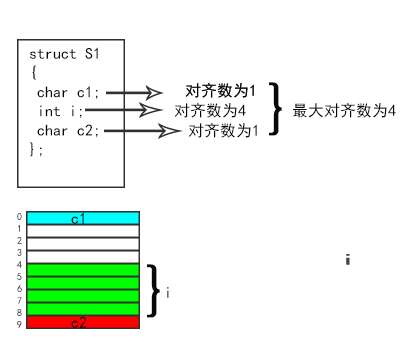
<style>
.page{position:relative;width:418px;height:359px;background:#ffffff}
.page>*{position:absolute;margin:0}
.t1{font:16px "SimHei";color:#0a0909}
.t2{font:61px "SimHei";color:#0a0909}
.t3{font:10px "SimHei"}
.t4{font:16px "SimHei"}
</style>
<div class="page">
<p class="t1" style="left:30px;top:47px;width:68px;height:110px">struct S1<br>{<br> char c1;<br> int i;<br> char c2;<br>};</p>
<p class="t1" style="left:185px;top:82px;width:69px;height:16px">对齐数为1</p>
<p class="t1" style="left:185px;top:82px;width:69px;height:16px">对齐数为1</p>
<p class="t2" style="left:269px;top:82px;width:13px;height:54px">}</p>
<p class="t1" style="left:174px;top:102px;width:72px;height:16px">对齐数为4</p>
<p class="t1" style="left:293px;top:102px;width:103px;height:16px">最大对齐数为4</p>
<p class="t1" style="left:188px;top:122px;width:69px;height:16px">对齐数为1</p>
<p class="t3" style="left:17px;top:213px;width:5px;height:115px">0<br>1<br>2<br>3<br>4<br>5<br>6<br>7<br>8<br>9</p>
<p class="t1" style="left:71px;top:212px;width:13px;height:12px">c1</p>
<p class="t4" style="left:346px;top:254px;width:2px;height:11px">i</p>
<p class="t4" style="left:347px;top:254px;width:2px;height:11px">i</p>
<p class="t4" style="left:348px;top:254px;width:2px;height:11px">i</p>
<p class="t2" style="left:147px;top:264px;width:13px;height:54px">}</p>
<p class="t4" style="left:167px;top:287px;width:2px;height:11px">i</p>
<p class="t1" style="left:71px;top:316px;width:15px;height:12px">c2</p>
</div>
